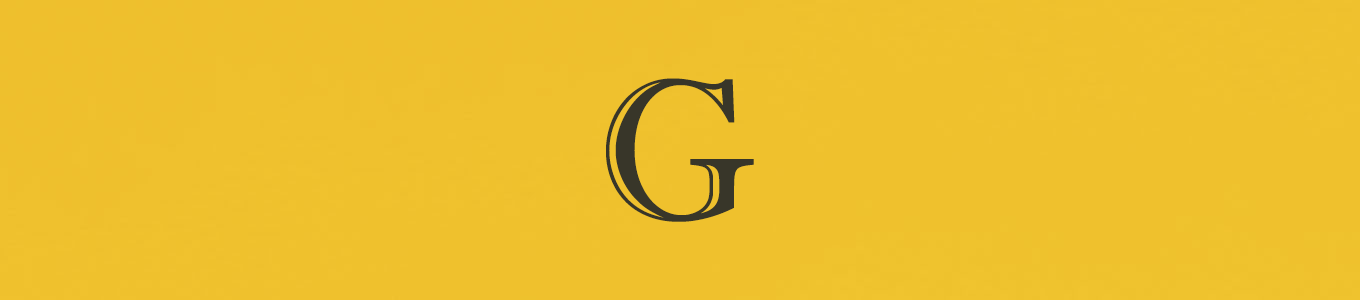
<style>
.page{position:relative;width:1360px;height:300px;background:#efc12d}
.page>*{position:absolute;margin:0}
.t1{font:200px "ImprintMT-Shadow";color:#383629}
</style>
<div class="page">
<p class="t1" style="left:606px;top:78px;width:148px;height:144px">G</p>
</div>
